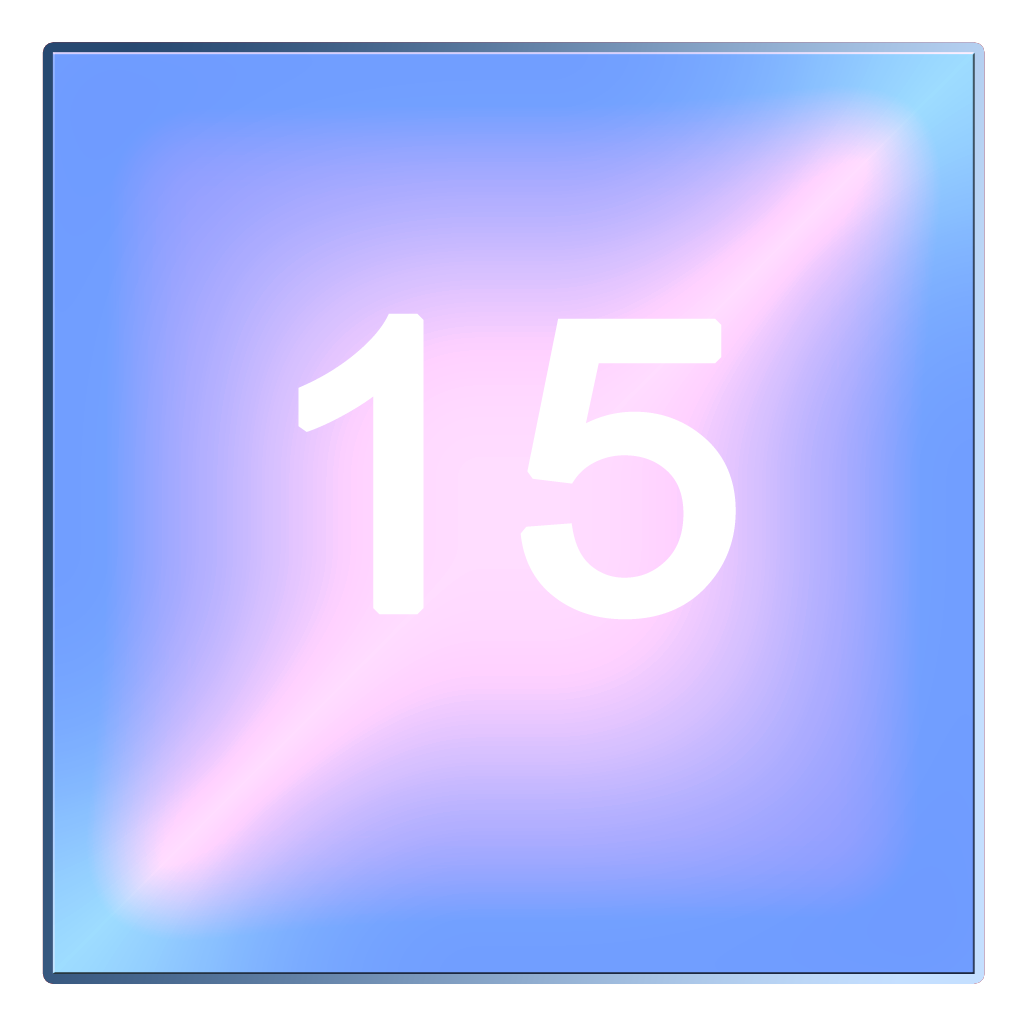
<style>
.page{position:relative;width:1024px;height:1024px}
.page>*{position:absolute;margin:0}
.t1{font:400px "ArialNarrow";color:#ffffff;font-weight:bold;scale:1.3 1}
</style>
<div class="page">
<p class="t1" style="left:298px;top:313px;width:438px;height:307px">15</p>
</div>
